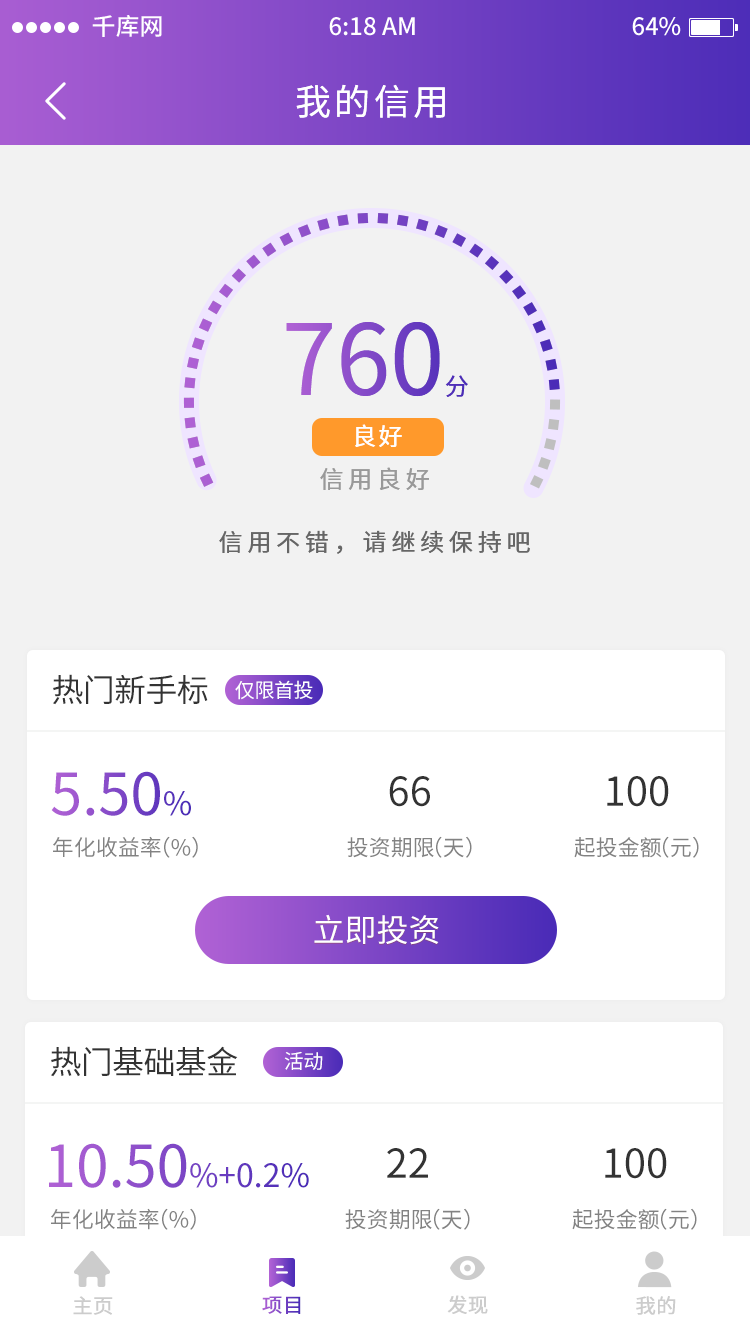
<style>
.page{position:relative;width:750px;height:1334px;background:#ffffff}
.page>*{position:absolute;margin:0}
.t1{font:36px "NotoSansHans-Regular";letter-spacing:0.1em;color:#ffffff;text-transform:uppercase}
.t2{font:98px "NotoSansHans-Regular";text-transform:uppercase}
.t3{font:24px "NotoSansHans-Regular";text-transform:uppercase}
.t4{font:24px "NotoSansHans-Regular";letter-spacing:0.1em;color:#ffffff;text-transform:uppercase}
.t5{font:24px "NotoSansHans-Regular";letter-spacing:0.2em;color:#999999;text-transform:uppercase}
.t6{font:24px "NotoSansHans-Regular";letter-spacing:0.2em;color:#666666;text-transform:uppercase}
.t7{font:32px "NotoSansHans-Regular";letter-spacing:-0.02em;color:#333333}
.t8{font:20px "NotoSansHans-Regular";letter-spacing:-0.02em;color:#ffffff}
.t9{font:58px "NotoSansHans-Regular"}
.t10{font:32px "NotoSansHans-Regular"}
.t11{font:40px "NotoSansHans-Regular";color:#333333}
.t12{font:22px "NotoSansHans-Regular";color:#828282}
.t13{font:32px "NotoSansHans-Regular";color:#ffffff}
.t14{font:20px "NotoSansHans-Regular";color:#cccccc;font-weight:bold}
.t15{font:20px "NotoSansHans-Regular";font-weight:bold}
</style>
<div class="page">
<p class="t1" style="left:296px;top:84px;width:149px;height:34px">我的信用</p>
<p class="t2" style="left:286px;top:322px;width:182px;height:75px">760<span class="t3">分</span></p>
<p class="t4" style="left:355px;top:424px;width:47px;height:23px">良好</p>
<p class="t5" style="left:320px;top:467px;width:109px;height:23px">信用良好</p>
<p class="t6" style="left:219px;top:530px;width:311px;height:24px">信用不错，请继续保持吧</p>
<p class="t7" style="left:53px;top:674px;width:155px;height:31px">热门新手标</p>
<p class="t8" style="left:235px;top:680px;width:78px;height:20px">仅限首投</p>
<p class="t9" style="left:51px;top:771px;width:140px;height:45px">5.50<span class="t10">%</span></p>
<p class="t11" style="left:389px;top:776px;width:41px;height:31px">66</p>
<p class="t11" style="left:607px;top:776px;width:62px;height:31px">100</p>
<p class="t12" style="left:53px;top:836px;width:108px;height:22px">年化收益率</p>
<p class="t12" style="left:164px;top:836px;width:34px;height:22px">（%）</p>
<p class="t12" style="left:347px;top:837px;width:87px;height:21px">投资期限</p>
<p class="t12" style="left:436px;top:836px;width:36px;height:22px">（天）</p>
<p class="t12" style="left:574px;top:837px;width:88px;height:21px">起投金额</p>
<p class="t12" style="left:663px;top:836px;width:36px;height:22px">（元）</p>
<p class="t13" style="left:314px;top:914px;width:125px;height:31px">立即投资</p>
<p class="t7" style="left:51px;top:1046px;width:187px;height:31px">热门基础基金</p>
<p class="t8" style="left:284px;top:1051px;width:39px;height:19px">活动</p>
<p class="t10" style="left:49px;top:1143px;width:260px;height:45px"><span class="t9">10.50</span>%+0.2%</p>
<p class="t11" style="left:387px;top:1148px;width:41px;height:30px">22</p>
<p class="t11" style="left:605px;top:1148px;width:62px;height:31px">100</p>
<p class="t12" style="left:51px;top:1208px;width:108px;height:22px">年化收益率</p>
<p class="t12" style="left:162px;top:1208px;width:34px;height:22px">（%）</p>
<p class="t12" style="left:345px;top:1209px;width:87px;height:21px">投资期限</p>
<p class="t12" style="left:434px;top:1208px;width:36px;height:22px">（天）</p>
<p class="t12" style="left:572px;top:1209px;width:88px;height:21px">起投金额</p>
<p class="t12" style="left:661px;top:1208px;width:36px;height:22px">（元）</p>
<p class="t14" style="left:73px;top:1296px;width:40px;height:19px">主页</p>
<p class="t15" style="left:262px;top:1296px;width:39px;height:18px">项目</p>
<p class="t14" style="left:447px;top:1295px;width:41px;height:19px">发现</p>
<p class="t14" style="left:636px;top:1296px;width:40px;height:19px">我的</p>
</div>
